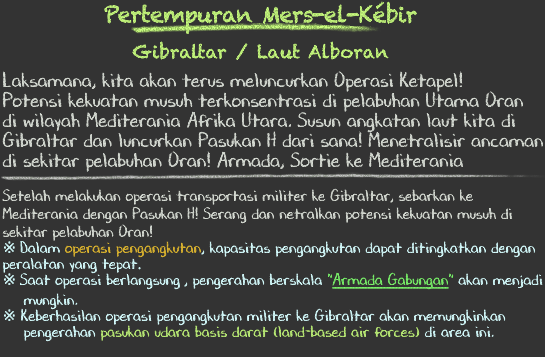
<style>
.page{position:relative;width:545px;height:357px;background:#333333}
.page>*{position:absolute;margin:0}
.t1{font:22px/36px "Chalkduster";letter-spacing:-0.04em;color:#b7e674}
.t2{font:18px/36px "Chalkduster";color:#b7e674}
.t3{font:20px/20px "DJBChalkItUp";color:#d9ded6}
.t4{font:16px/18px "DJBChalkItUp";color:#d9ded6}
.t5{font:16px/16px "TimesNewRomanPSMT";color:#d7feff}
.t6{font:16px/16px "DJBChalkItUp";color:#d7feff}
.t7{font:16px/16px "DJBChalkItUp";color:#dfb731}
.t8{font:16px/16px "DJBChalkItUp";color:#7bf26b}
.t9{font:16px/16px "DJBChalkItUp";color:#7bf26b;text-decoration:underline}
.t10{font:16px/20px "DJBChalkItUp";color:#d7feff}
.t11{font:16px/16px "DJBChalkItUp";color:#bdef78}
</style>
<div class="page">
<p class="t1" style="left:104px;top:1px;width:313px;height:60px;text-align:center">Pertempuran Mers-el-Kébir<br><span class="t2">Gibraltar / Laut Alboran</span></p>
<p class="t3" style="left:2px;top:71px;width:542px;height:271px">Laksamana, kita akan terus meluncurkan Operasi Ketapel!<br>Potensi kekuatan musuh terkonsentrasi di pelabuhan Utama Oran<br>di wilayah Mediterania Afrika Utara. Susun angkatan laut kita di<br>Gibraltar dan luncurkan Pasukan H dari sana! Menetralisir ancaman<br>di sekitar pelabuhan Oran! Armada, Sortie ke Mediterania<br><br><span class="t4">Setelah melakukan operasi transportasi militer ke Gibraltar, sebarkan ke <br>Mediterania dengan Pasukan H! Serang dan netralkan potensi kekuatan musuh di <br>sekitar pelabuhan Oran!<br></span><span class="t5">※ </span><span class="t6">Dalam </span><span class="t7">operasi pengangkutan</span><span class="t6">, kapasitas pengangkutan dapat ditingkatkan dengan<br>peralatan yang tepat</span><span class="t5">.<br>※ </span><span class="t6">Saat operasi berlangsung , pengerahan berskala </span><span class="t8">"</span><span class="t9">Armada Gabungan</span><span class="t8">" </span><span class="t6">akan menjadi<br>　 mungkin</span><span class="t10">.<br></span><span class="t5">※ </span><span class="t6">Keberhasilan operasi pengangkutan militer ke Gibraltar akan memungkinkan<br>　 pengerahan </span><span class="t11">pasukan udara basis darat (land-based air forces) </span><span class="t6">di area ini.</span></p>
</div>
